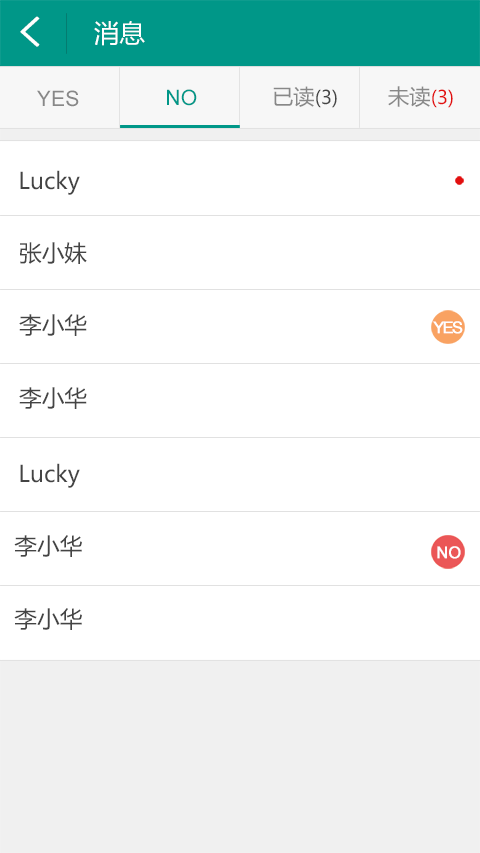
<style>
.page{position:relative;width:480px;height:853px;background:#ffffff}
.page>*{position:absolute;margin:0}
.t1{font:41.3px "SimHei";color:#ffffff;font-weight:bold}
.t2{font:25.3px "MicrosoftYaHei";color:#ffffff}
.t3{font:21.3px "ArialMT";color:#009788}
.t4{font:18.7px "MicrosoftYaHei";color:#444444}
.t5{font:21.3px "MicrosoftYaHei";color:#888888}
.t6{font:18.7px "MicrosoftYaHei";color:#e20f0f}
.t7{font:21.3px "ArialMT";color:#888888}
.t8{font:22.7px "MicrosoftYaHei";color:#444444}
.t9{font:16px "ArialMT";letter-spacing:-0.12em;color:#ffffff;font-weight:bold}
.t10{font:16px "ArialMT";color:#ffffff;font-weight:bold}
</style>
<div class="page">
<p class="t1" style="left:20px;top:16px;width:20px;height:31px">&lt;</p>
<p class="t2" style="left:94px;top:21px;width:51px;height:25px">消息</p>
<p class="t3" style="left:167px;top:89px;width:30px;height:17px">NO</p>
<p class="t4" style="left:273px;top:86px;width:64px;height:22px"><span class="t5">已读</span>(3)</p>
<p class="t6" style="left:388px;top:86px;width:65px;height:22px"><span class="t5">未读</span>(3)</p>
<p class="t7" style="left:37px;top:90px;width:42px;height:17px">YES</p>
<p class="t8" style="left:20px;top:170px;width:60px;height:25px">Lucky</p>
<p class="t8" style="left:20px;top:242px;width:67px;height:22px">张小妹</p>
<p class="t8" style="left:19px;top:314px;width:68px;height:22px">李小华</p>
<p class="t9" style="left:433px;top:321px;width:30px;height:13px">YES</p>
<p class="t8" style="left:19px;top:387px;width:68px;height:22px">李小华</p>
<p class="t8" style="left:20px;top:463px;width:60px;height:25px">Lucky</p>
<p class="t8" style="left:14px;top:535px;width:68px;height:22px">李小华</p>
<p class="t10" style="left:437px;top:546px;width:24px;height:13px">NO</p>
<p class="t8" style="left:14px;top:608px;width:68px;height:22px">李小华</p>
</div>
